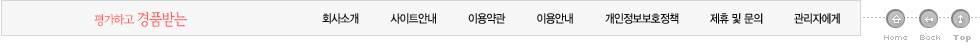
<style>
.page{position:relative;width:980px;height:45px;background:#f7f7f7}
.page>*{position:absolute;margin:0}
.t1{font:12.7px "CreMjoM";letter-spacing:-0.05em;color:#ff5c5c;scale:0.87 1}
.t2{font:15.9px "CreMjoM";letter-spacing:-0.05em;color:#ff5c5c;scale:0.87 1}
.t3{font:11.7px "YDIYGO330";letter-spacing:-0.05em;color:#101010;scale:0.91 1}
.t4{font:8px "Kroeger0553";color:#b8b8b8}
.t5{font:8px "Kroeger0553";color:#b8b8b8;font-weight:bold}
</style>
<div class="page">
<p class="t1" style="left:94px;top:11px;width:93px;height:16px">평가하고 <span class="t2">경품받는</span></p>
<p class="t3" style="left:322px;top:13px;width:518px;height:11px">회사소개          사이트안내          이용약관          이용안내          개인정보보호정책          제휴 및 문의          관리자에게</p>
<p class="t4" style="left:884px;top:35px;width:87px;height:7px">Home    Back    <span class="t5">Top</span></p>
</div>
